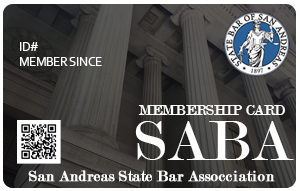
<style>
.page{position:relative;width:300px;height:191px}
.page>*{position:absolute;margin:0}
.t1{font:12.5px "Corbel";color:#ffffff}
.t2{font:20.8px "Corbel";color:#ffffff}
.t3{font:15px "Modern-Regular";color:#ffffff}
.t4{font:60px "Modern-Regular";color:#ffffff}
.t5{font:16px "Modern-Regular";color:#ffffff;font-weight:bold}
</style>
<div class="page">
<p class="t1" style="left:20px;top:42px;width:82px;height:24px"><span class="t2"> <br></span>ID# <br>MEMBER SINCE</p>
<p class="t3" style="left:138px;top:105px;width:147px;height:10px">MEMBERSHIP CARD</p>
<p class="t4" style="left:135px;top:121px;width:159px;height:39px">SABA</p>
<p class="t5" style="left:28px;top:170px;width:247px;height:12px">San Andreas State Bar Assocciation</p>
</div>
